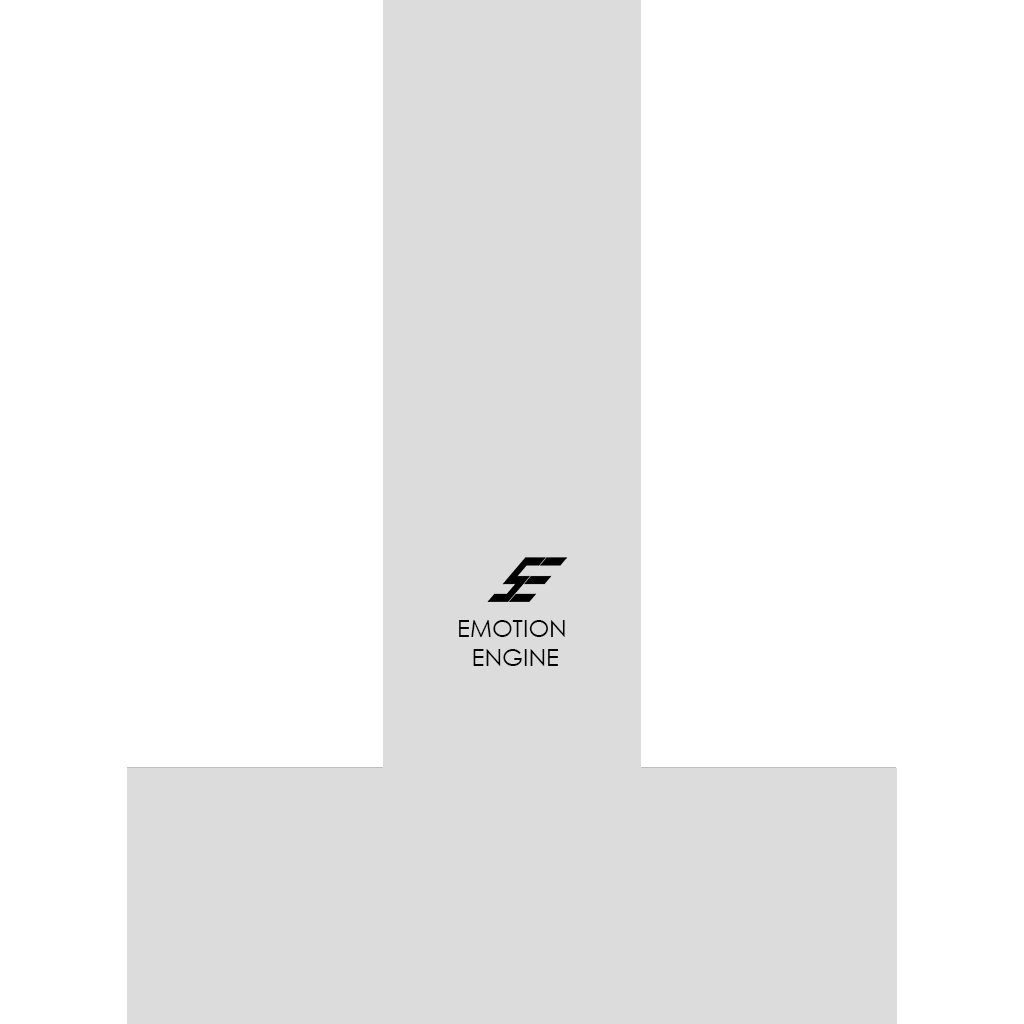
<style>
.page{position:relative;width:1024px;height:1024px;background:#ffffff}
.page>*{position:absolute;margin:0}
.t1{font:24px "CenturyGothic";color:#000000}
</style>
<div class="page">
<p class="t1" style="left:459px;top:620px;width:106px;height:46px;text-align:center">EMOTION <br>ENGINE</p>
</div>
